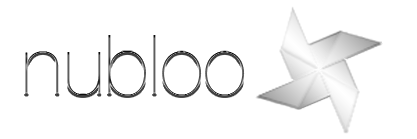
<style>
.page{position:relative;width:417px;height:139px;background:#ffffff}
.page>*{position:absolute;margin:0}
.t1{font:83.4px "HelveticaNeue-UltraLight"}
</style>
<div class="page">
<p class="t1" style="left:25px;top:35px;width:220px;height:61px">nubloo</p>
</div>
